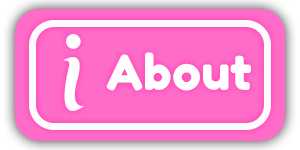
<style>
.page{position:relative;width:300px;height:150px;background:#ff6bc8}
.page>*{position:absolute;margin:0}
.t1{font:48.6px "ForkdokaOne-Regular";color:#ffffff}
</style>
<div class="page">
<p class="t1" style="left:106px;top:52px;width:145px;height:39px">About</p>
</div>
